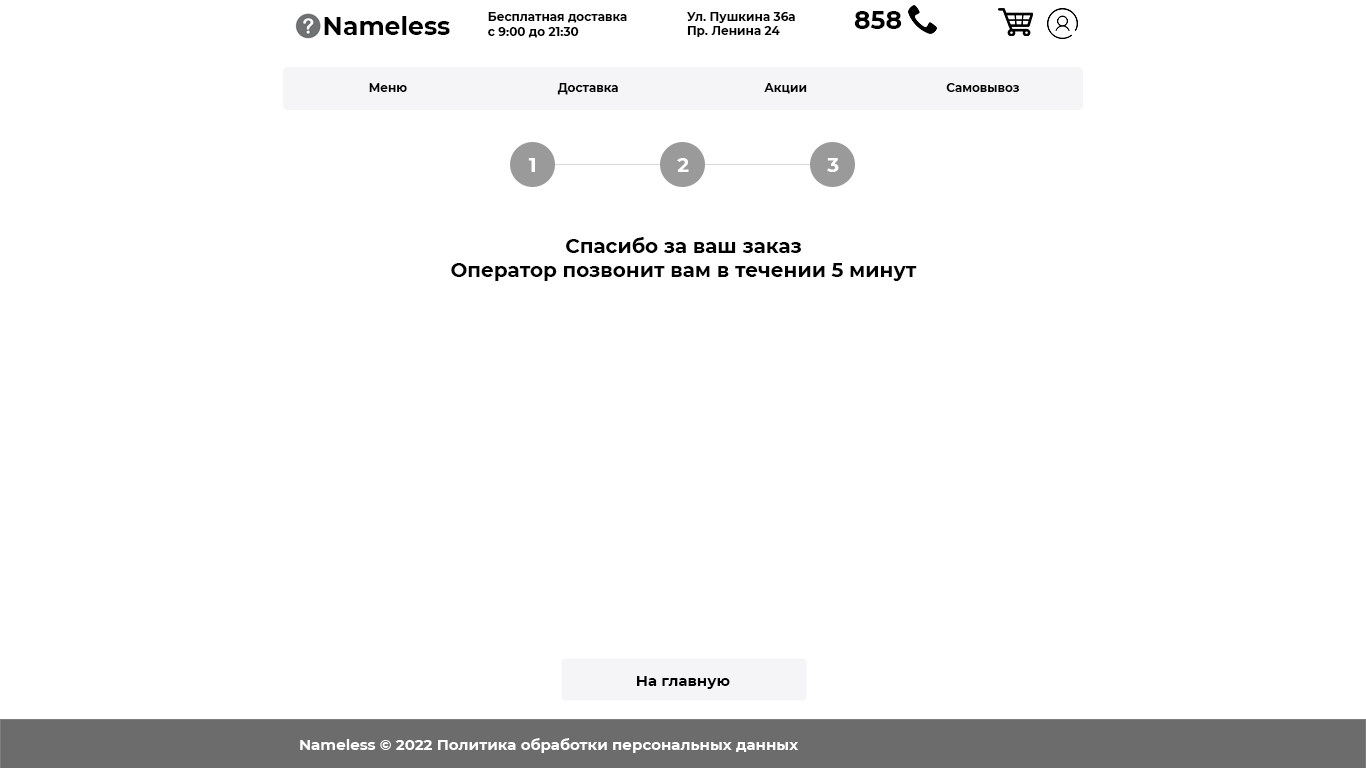
<style>
.page{position:relative;width:1366px;height:768px;background:#ffffff}
.page>*{position:absolute;margin:0}
.t1{font:25px "Montserrat-Bold";color:#000000}
.t2{font:12px "Montserrat-Bold";color:#000000}
.t3{font:20px "Montserrat-Bold";color:#ffffff}
.t4{font:20px "Montserrat-Bold";color:#000000}
.t5{font:15px "Montserrat-Bold";color:#000000}
.t6{font:15px "Montserrat-Bold";color:#ffffff}
</style>
<div class="page">
<p class="t1" style="left:324px;top:16px;width:126px;height:19px">Nameless</p>
<p class="t2" style="left:488px;top:12px;width:139px;height:26px">Бесплатная доставка<br>с 9:00 до 21:30</p>
<p class="t2" style="left:687px;top:12px;width:108px;height:25px">Ул. Пушкина 36а<br>Пр. Ленина 24</p>
<p class="t1" style="left:854px;top:11px;width:48px;height:18px">858</p>
<p class="t2" style="left:369px;top:83px;width:38px;height:9px">Меню</p>
<p class="t2" style="left:557px;top:83px;width:61px;height:12px">Доставка</p>
<p class="t2" style="left:764px;top:83px;width:43px;height:11px">Акции</p>
<p class="t2" style="left:946px;top:83px;width:74px;height:9px">Самовывоз</p>
<p class="t3" style="left:528px;top:158px;width:7px;height:14px">1</p>
<p class="t3" style="left:677px;top:158px;width:12px;height:14px">2</p>
<p class="t3" style="left:827px;top:158px;width:12px;height:14px">3</p>
<p class="t4" style="left:451px;top:237px;width:466px;height:44px;text-align:center">Спасибо за ваш заказ<br>Оператор позвонит вам в течении 5 минут</p>
<p class="t5" style="left:637px;top:676px;width:93px;height:13px">На главную</p>
<p class="t6" style="left:300px;top:738px;width:499px;height:15px">Nameless © 2022 Политика обработки персональных данных</p>
</div>
